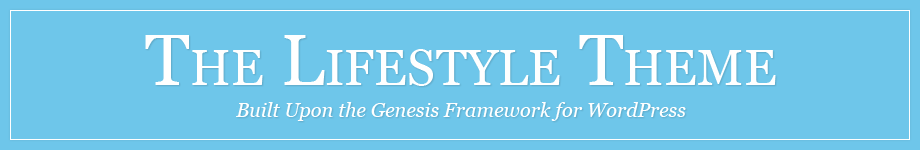
<style>
.page{position:relative;width:920px;height:150px;background:#6ec6ea}
.page>*{position:absolute;margin:0}
.t1{font:20px/31.3px "Georgia-Italic";color:#ffffff}
.t2{font:72px/36px "Georgia";color:#ffffff;font-variant:small-caps}
</style>
<div class="page">
<p class="t1" style="left:145px;top:35px;width:631px;height:86px;text-align:center"><span class="t2">The Lifestyle Theme<br></span>Built Upon the Genesis Framework for WordPress</p>
</div>
